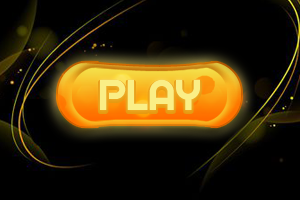
<style>
.page{position:relative;width:300px;height:200px;background:#000000}
.page>*{position:absolute;margin:0}
.t1{font:48px "Optien";color:#faee86;text-transform:uppercase}
</style>
<div class="page">
<p class="t1" style="left:100px;top:79px;width:100px;height:31px">PLAY</p>
</div>
